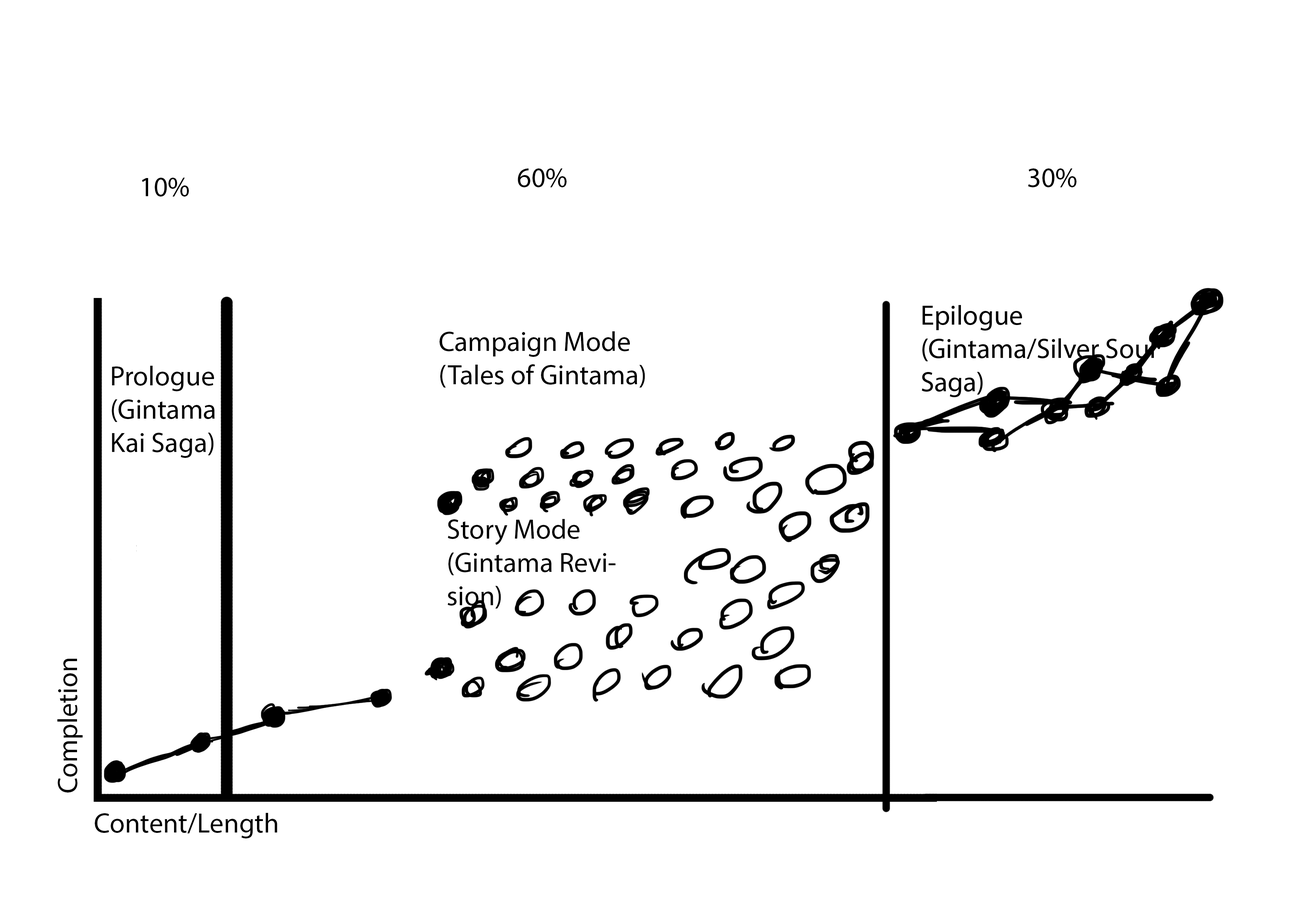
<style>
.page{position:relative;width:1299px;height:918px;background:#ffffff}
.page>*{position:absolute;margin:0}
.t1{font:27.8px "MyriadPro-Regular";color:#000000}
.t2{font:27.8px "MyriadPro-Regular";color:#010101}
</style>
<div class="page">
<p class="t1" style="left:518px;top:168px;width:48px;height:19px">60%</p>
<p class="t1" style="left:1028px;top:168px;width:48px;height:19px">30%</p>
<p class="t1" style="left:142px;top:178px;width:47px;height:19px">10%</p>
<p class="t2" style="left:439px;top:331px;width:206px;height:57px">Campaign Mode<br>(Tales of Gintama)</p>
<p class="t1" style="left:112px;top:366px;width:103px;height:92px">Prologue (Gintama Kai Saga)</p>
<p class="t2" style="left:448px;top:519px;width:167px;height:90px">Story Mode<br>(Gintama Revision)</p>
<p class="t1" style="left:57px;top:659px;width:26px;height:134px;rotate:-90deg">Completion</p>
<p class="t1" style="left:95px;top:813px;width:182px;height:26px">Content/Length</p>
</div>
